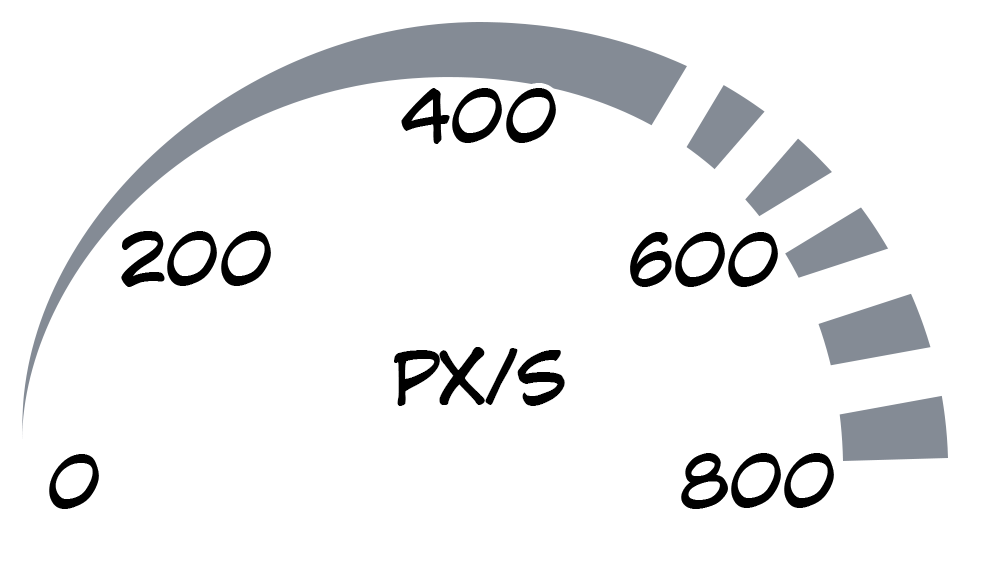
<style>
.page{position:relative;width:1000px;height:574px;background:#ffffff}
.page>*{position:absolute;margin:0}
.t1{font:72px "CCWildWordsRoman";color:#000000}
</style>
<div class="page">
<p class="t1" style="left:401px;top:88px;width:155px;height:56px">400</p>
<p class="t1" style="left:121px;top:231px;width:150px;height:56px">200</p>
<p class="t1" style="left:630px;top:232px;width:148px;height:55px">600</p>
<p class="t1" style="left:394px;top:347px;width:171px;height:59px">PX/S</p>
<p class="t1" style="left:49px;top:454px;width:50px;height:55px">0</p>
<p class="t1" style="left:681px;top:453px;width:153px;height:56px">800</p>
</div>
